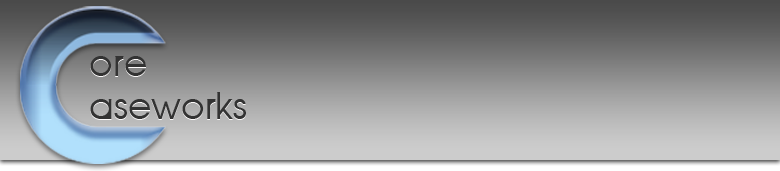
<style>
.page{position:relative;width:780px;height:171px}
.page>*{position:absolute;margin:0}
.t1{font:36px "SeraphicOrganism";color:#333333}
</style>
<div class="page">
<p class="t1" style="left:90px;top:57px;width:156px;height:63px">ore<br>aseworks</p>
<p class="t1" style="left:90px;top:56px;width:156px;height:63px">ore<br>aseworks</p>
</div>
